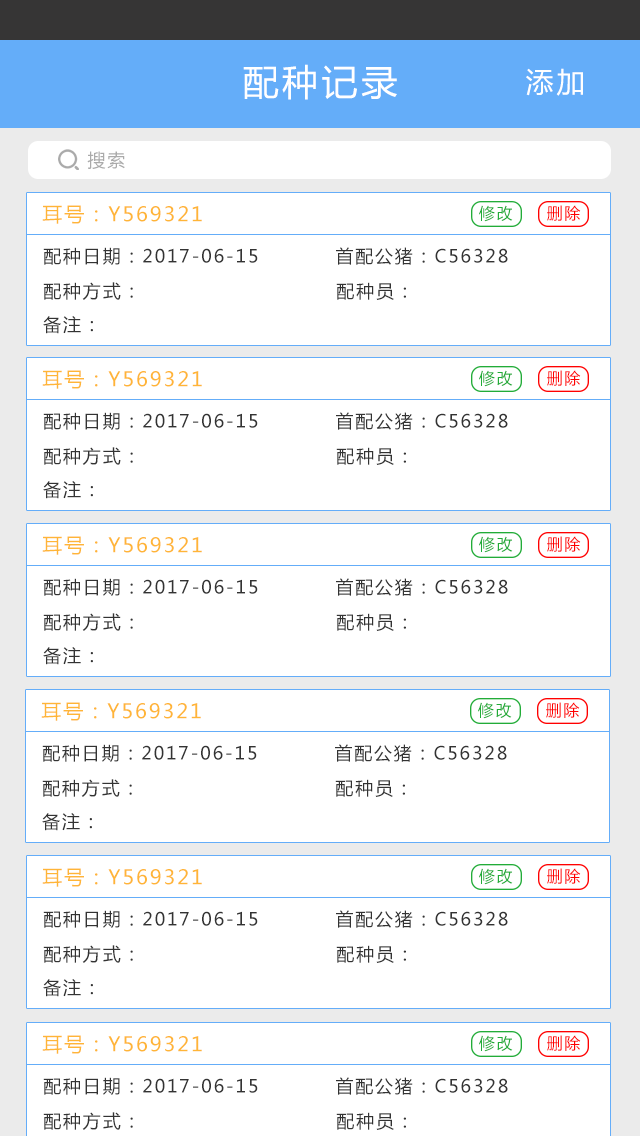
<style>
.page{position:relative;width:640px;height:1136px;background:#ffffff}
.page>*{position:absolute;margin:0}
.t1{font:36px "MicrosoftYaHei";letter-spacing:0.1em;color:#ffffff}
.t2{font:28px "MicrosoftYaHei";letter-spacing:0.1em;color:#ffffff}
.t3{font:18px "MicrosoftYaHei";letter-spacing:0.1em;color:#aaaaaa}
.t4{font:20px "MicrosoftYaHei";letter-spacing:0.1em;color:#ffb537}
.t5{font:16px "MicrosoftYaHei";letter-spacing:0.1em;color:#22ac38}
.t6{font:16px "MicrosoftYaHei";letter-spacing:0.1em;color:#ff0000}
.t7{font:18px "MicrosoftYaHei";letter-spacing:0.1em;color:#333333}
</style>
<div class="page">
<p class="t1" style="left:243px;top:64px;width:154px;height:36px">配种记录</p>
<p class="t2" style="left:526px;top:68px;width:57px;height:28px">添加</p>
<p class="t3" style="left:87px;top:151px;width:38px;height:18px">搜索</p>
<p class="t4" style="left:42px;top:205px;width:160px;height:19px">耳号：Y569321</p>
<p class="t5" style="left:479px;top:205px;width:34px;height:17px">修改</p>
<p class="t6" style="left:547px;top:205px;width:34px;height:16px">删除</p>
<p class="t7" style="left:43px;top:247px;width:215px;height:18px">配种日期：2017-06-15</p>
<p class="t7" style="left:336px;top:247px;width:172px;height:18px">首配公猪：C56328</p>
<p class="t7" style="left:43px;top:282px;width:90px;height:18px">配种方式：</p>
<p class="t7" style="left:336px;top:282px;width:70px;height:18px">配种员：</p>
<p class="t7" style="left:43px;top:316px;width:50px;height:18px">备注：</p>
<p class="t4" style="left:42px;top:370px;width:160px;height:19px">耳号：Y569321</p>
<p class="t5" style="left:479px;top:370px;width:34px;height:17px">修改</p>
<p class="t6" style="left:547px;top:370px;width:34px;height:16px">删除</p>
<p class="t7" style="left:43px;top:412px;width:215px;height:18px">配种日期：2017-06-15</p>
<p class="t7" style="left:336px;top:412px;width:172px;height:18px">首配公猪：C56328</p>
<p class="t7" style="left:43px;top:447px;width:90px;height:18px">配种方式：</p>
<p class="t7" style="left:336px;top:447px;width:70px;height:18px">配种员：</p>
<p class="t7" style="left:43px;top:481px;width:50px;height:18px">备注：</p>
<p class="t4" style="left:42px;top:536px;width:160px;height:19px">耳号：Y569321</p>
<p class="t5" style="left:479px;top:536px;width:34px;height:17px">修改</p>
<p class="t6" style="left:547px;top:536px;width:34px;height:16px">删除</p>
<p class="t7" style="left:43px;top:578px;width:215px;height:18px">配种日期：2017-06-15</p>
<p class="t7" style="left:336px;top:578px;width:172px;height:18px">首配公猪：C56328</p>
<p class="t7" style="left:43px;top:613px;width:90px;height:18px">配种方式：</p>
<p class="t7" style="left:336px;top:613px;width:70px;height:18px">配种员：</p>
<p class="t7" style="left:43px;top:647px;width:50px;height:18px">备注：</p>
<p class="t4" style="left:41px;top:702px;width:160px;height:19px">耳号：Y569321</p>
<p class="t5" style="left:478px;top:702px;width:34px;height:17px">修改</p>
<p class="t6" style="left:546px;top:702px;width:34px;height:16px">删除</p>
<p class="t7" style="left:42px;top:744px;width:215px;height:18px">配种日期：2017-06-15</p>
<p class="t7" style="left:335px;top:744px;width:172px;height:18px">首配公猪：C56328</p>
<p class="t7" style="left:42px;top:779px;width:90px;height:18px">配种方式：</p>
<p class="t7" style="left:335px;top:779px;width:70px;height:18px">配种员：</p>
<p class="t7" style="left:42px;top:813px;width:50px;height:18px">备注：</p>
<p class="t4" style="left:42px;top:868px;width:160px;height:19px">耳号：Y569321</p>
<p class="t5" style="left:479px;top:868px;width:34px;height:17px">修改</p>
<p class="t6" style="left:547px;top:868px;width:34px;height:16px">删除</p>
<p class="t7" style="left:43px;top:910px;width:215px;height:18px">配种日期：2017-06-15</p>
<p class="t7" style="left:336px;top:910px;width:172px;height:18px">首配公猪：C56328</p>
<p class="t7" style="left:43px;top:945px;width:90px;height:18px">配种方式：</p>
<p class="t7" style="left:336px;top:945px;width:70px;height:18px">配种员：</p>
<p class="t7" style="left:43px;top:979px;width:50px;height:18px">备注：</p>
<p class="t4" style="left:42px;top:1035px;width:160px;height:19px">耳号：Y569321</p>
<p class="t5" style="left:479px;top:1035px;width:34px;height:17px">修改</p>
<p class="t6" style="left:547px;top:1035px;width:34px;height:16px">删除</p>
<p class="t7" style="left:43px;top:1077px;width:215px;height:18px">配种日期：2017-06-15</p>
<p class="t7" style="left:336px;top:1077px;width:172px;height:18px">首配公猪：C56328</p>
<p class="t7" style="left:43px;top:1112px;width:90px;height:18px">配种方式：</p>
<p class="t7" style="left:336px;top:1112px;width:70px;height:18px">配种员：</p>
</div>
